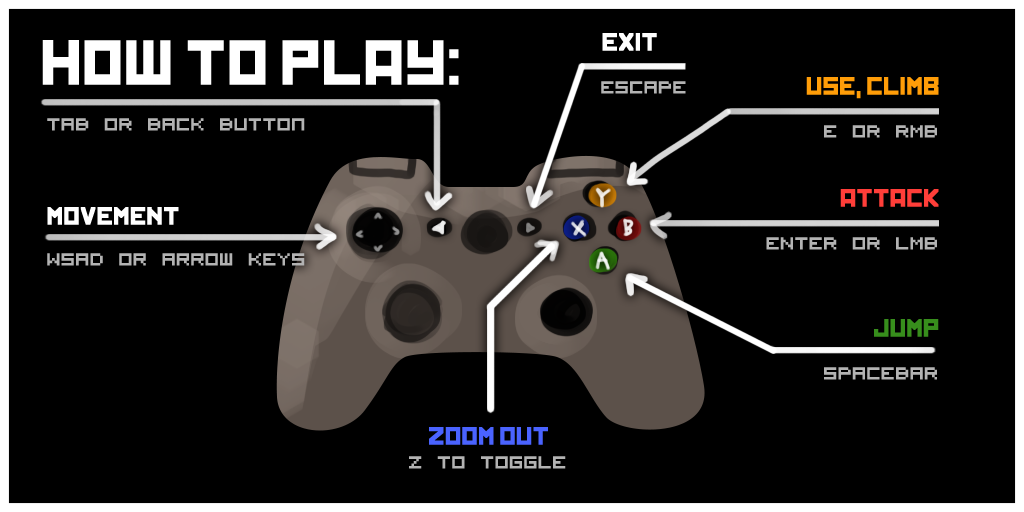
<style>
.page{position:relative;width:1024px;height:512px;background:#000000}
.page>*{position:absolute;margin:0}
.t1{font:60px "Kremlin";color:#ffffff}
.t2{font:24px "Kremlin";color:#ffffff}
.t3{font:24px "Kremlin";color:#ff9c07}
.t4{font:24px "VisitorTT1BRK";color:#b3b3b3}
.t5{font:24px "Kremlin";color:#ff3e39}
.t6{font:24px "Kremlin";color:#368d1c}
.t7{font:24px "Kremlin";color:#4b64ff}
</style>
<div class="page">
<p class="t1" style="left:42px;top:40px;width:417px;height:45px">HOW TO PLAY:</p>
<p class="t2" style="left:602px;top:33px;width:55px;height:18px">EXIT</p>
<p class="t3" style="left:806px;top:77px;width:133px;height:22px">USE, CLIMB</p>
<p class="t4" style="left:601px;top:81px;width:85px;height:13px">ESCAPE</p>
<p class="t4" style="left:47px;top:118px;width:258px;height:13px">TAB OR BACK BUTTon</p>
<p class="t4" style="left:824px;top:125px;width:113px;height:13px">E OR RMB</p>
<p class="t5" style="left:840px;top:189px;width:99px;height:18px">ATTACK</p>
<p class="t2" style="left:47px;top:207px;width:132px;height:18px">MOVEMENT</p>
<p class="t4" style="left:766px;top:237px;width:171px;height:13px">ENTER OR LMB</p>
<p class="t4" style="left:47px;top:253px;width:258px;height:13px">WSAD or arrow keys</p>
<p class="t6" style="left:874px;top:319px;width:65px;height:18px">JUMP</p>
<p class="t4" style="left:824px;top:367px;width:113px;height:13px">SPACEBAR</p>
<p class="t7" style="left:429px;top:427px;width:119px;height:18px">ZOOM OUT</p>
<p class="t4" style="left:409px;top:456px;width:157px;height:13px">Z TO TOGGLE</p>
</div>
